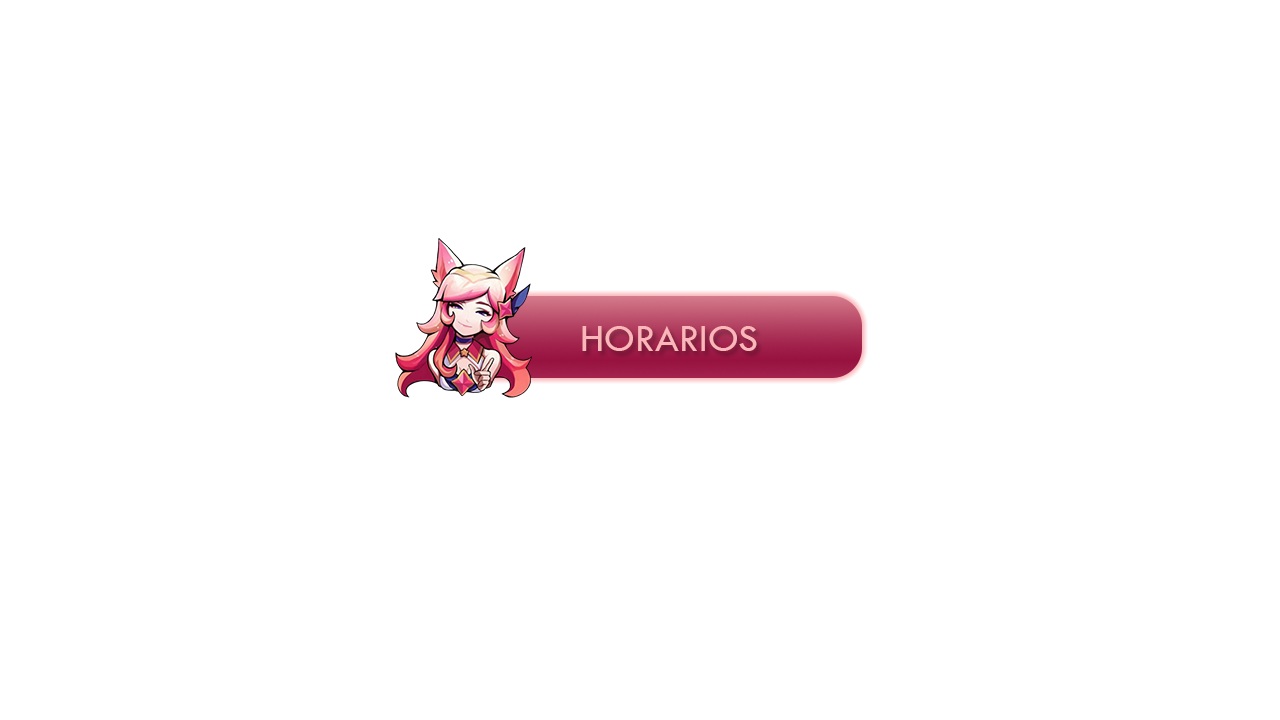
<style>
.page{position:relative;width:1280px;height:720px;background:#ffffff}
.page>*{position:absolute;margin:0}
.t1{font:40px "TwCenMT-Regular";color:#fab6b9}
</style>
<div class="page">
<p class="t1" style="left:582px;top:326px;width:175px;height:25px">HORARIOS</p>
</div>
